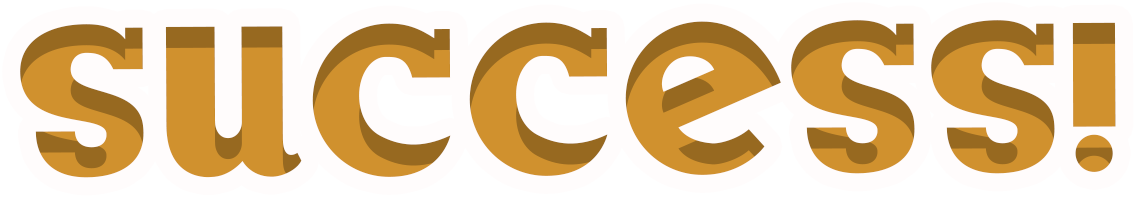
<style>
.page{position:relative;width:1136px;height:198px;background:#fffcfc}
.page>*{position:absolute;margin:0}
.t1{font:204.1px "BadTyp-Regular";color:#d0912e}
</style>
<div class="page">
<p class="t1" style="left:20px;top:20px;width:1096px;height:158px">success!</p>
</div>
